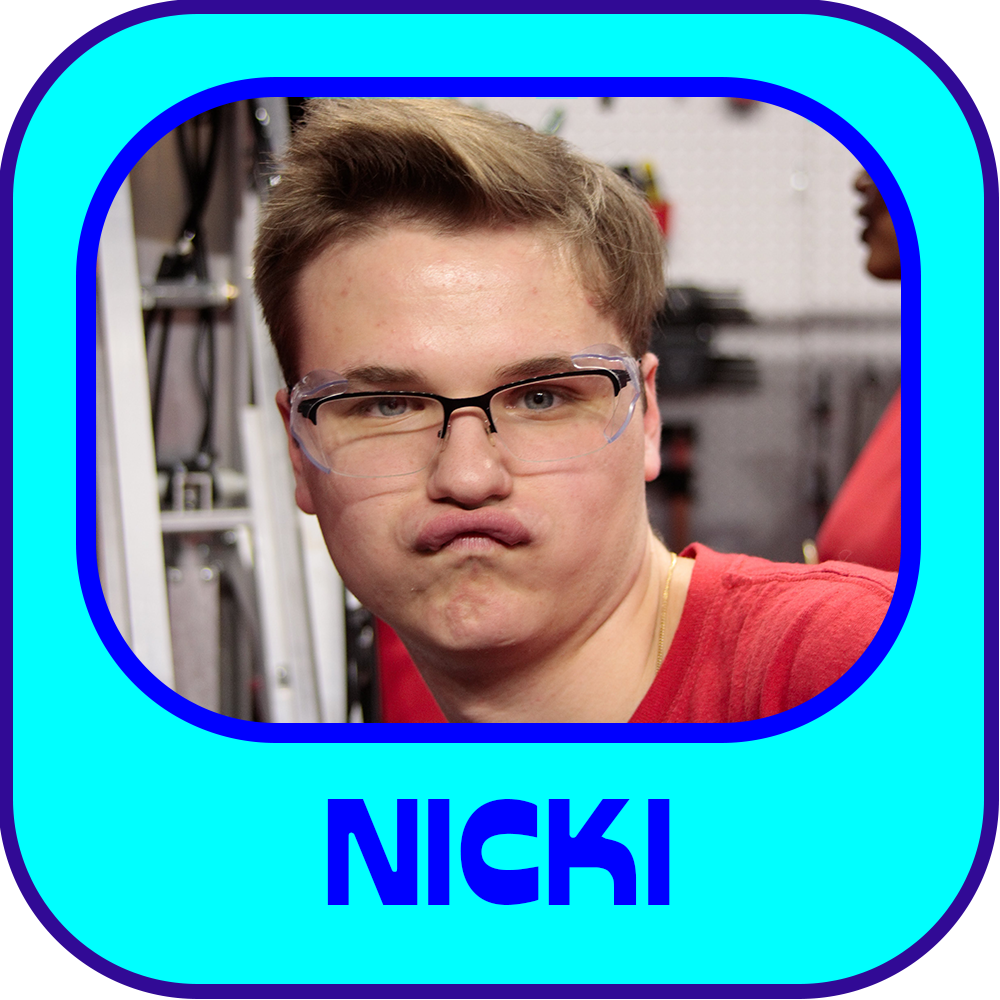
<style>
.page{position:relative;width:1000px;height:1000px;background:#00ffff}
.page>*{position:absolute;margin:0}
.t1{font:145.8px "Glockenspiel";color:#0000ff}
</style>
<div class="page">
<p class="t1" style="left:327px;top:799px;width:343px;height:106px">NICKI</p>
</div>
